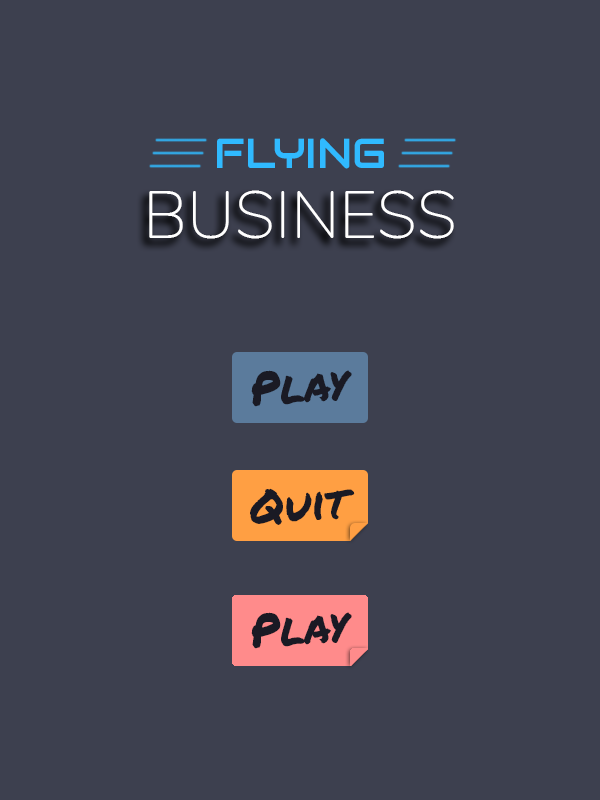
<style>
.page{position:relative;width:600px;height:800px;background:#3d404f}
.page>*{position:absolute;margin:0}
.t1{font:41.7px "Audiowide-Regular";color:#30baff}
.t2{font:66.7px "Nunito-ExtraLight";color:#ffffff}
.t3{font:46px "PermanentMarker";color:#1a1a24}
</style>
<div class="page">
<p class="t1" style="left:217px;top:138px;width:167px;height:31px">FLYING</p>
<p class="t2" style="left:149px;top:190px;width:305px;height:49px">BUSINESS</p>
<p class="t3" style="left:251px;top:370px;width:101px;height:37px;rotate:-4deg">Play</p>
<p class="t3" style="left:250px;top:488px;width:105px;height:37px;rotate:-4deg">Quit</p>
<p class="t3" style="left:251px;top:612px;width:101px;height:37px;rotate:-4deg">Play</p>
</div>
